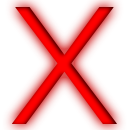
<style>
.page{position:relative;width:130px;height:130px;background:#ffffff}
.page>*{position:absolute;margin:0}
.t1{font:237.7px "NexaLight"}
</style>
<div class="page">
<p class="t1" style="left:12px;top:7px;width:105px;height:117px">x</p>
</div>
